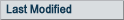
<style>
.page{position:relative;width:124px;height:20px;background:#d9dde0}
.page>*{position:absolute;margin:0}
.t1{font:12px "ArialNarrow";color:#103852;font-weight:bold;scale:1.05 1}
</style>
<div class="page">
<p class="t1" style="left:6px;top:4px;width:66px;height:10px">Last Modified</p>
</div>
